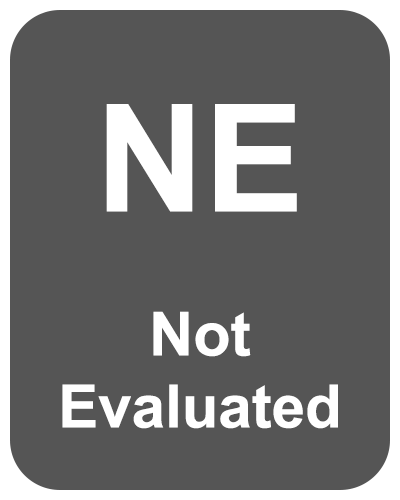
<style>
.page{position:relative;width:400px;height:500px;background:#555555}
.page>*{position:absolute;margin:0}
.t1{font:60px "Arial-BoldMT";color:#ffffff}
.t2{font:30px "Arial-BoldMT";color:#ffffff}
.t3{font:150px "Arial-BoldMT";color:#ffffff}
.t4{font:61px/48px "Arial-BoldMT";color:#ffffff}
</style>
<div class="page">
<p class="t1" style="left:62px;top:104px;width:276px;height:325px;text-align:justify"><span class="t2">  <br></span><span class="t3">NE<br></span><span class="t4"> <br><br>Not<br></span>Evaluated</p>
</div>
